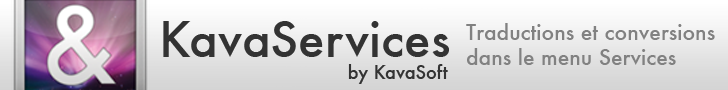
<style>
.page{position:relative;width:728px;height:90px}
.page>*{position:absolute;margin:0}
.t1{font:48px "Futura-Medium";color:#333333}
.t2{font:18px "Futura-Medium";color:#333333}
.t3{font:21px "Futura-Medium";color:#818181}
</style>
<div class="page">
<p class="t1" style="left:163px;top:21px;width:286px;height:63px">KavaServices<br><span class="t2">                                  by KavaSoft</span></p>
<p class="t3" style="left:466px;top:23px;width:249px;height:42px">Traductions et conversions<br>dans le menu Services</p>
</div>
